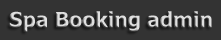
<style>
.page{position:relative;width:221px;height:40px;background:#333333}
.page>*{position:absolute;margin:0}
.t1{font:21.1px "Tahoma-Bold"}
</style>
<div class="page">
<p class="t1" style="left:9px;top:11px;width:203px;height:21px">Spa Booking admin</p>
</div>
